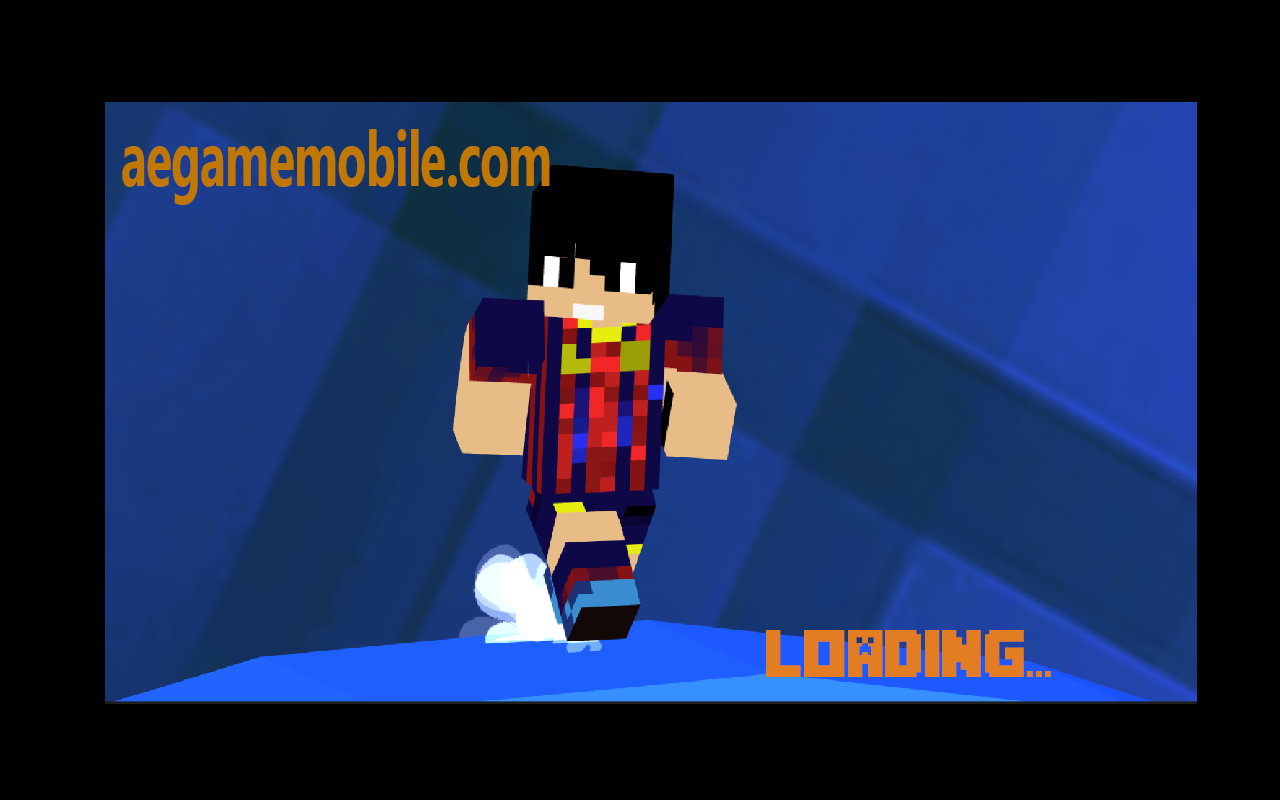
<style>
.page{position:relative;width:1280px;height:800px;background:#000000}
.page>*{position:absolute;margin:0}
.t1{font:77.2px "MicrosoftNewTaiLue-Bold";letter-spacing:-0.02em;color:#c17802;scale:0.63 1}
.t2{font:47px "MineCrafter-3";letter-spacing:-0.02em;color:#e27d23}
</style>
<div class="page">
<p class="t1" style="left:122px;top:129px;width:428px;height:76px">aegamemobile.com</p>
<p class="t2" style="left:766px;top:630px;width:285px;height:47px">LOADING...</p>
</div>
